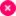
<style>
.page{position:relative;width:16px;height:16px;background:#ff0066}
.page>*{position:absolute;margin:0}
.t1{font:8px "04b08"}
</style>
<div class="page">
<p class="t1" style="left:5px;top:5px;width:6px;height:6px">X</p>
</div>
